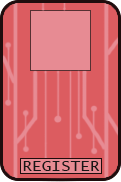
<style>
.page{position:relative;width:121px;height:182px;background:#dc5c60}
.page>*{position:absolute;margin:0}
.t1{font:16px "LucidaConsole";color:#171615}
</style>
<div class="page">
<p class="t1" style="left:23px;top:161px;width:77px;height:10px">REGISTER</p>
</div>
